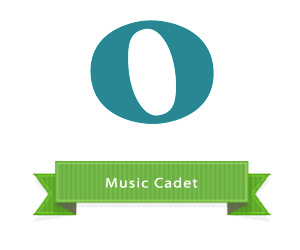
<style>
.page{position:relative;width:300px;height:250px;background:#ffffff}
.page>*{position:absolute;margin:0}
.t1{font:14px "MyriadPro-Regular";letter-spacing:0.08em;color:#ffffff;scale:1.12 1}
</style>
<div class="page">
<p class="t1" style="left:106px;top:177px;width:92px;height:11px">Music Cadet</p>
</div>
